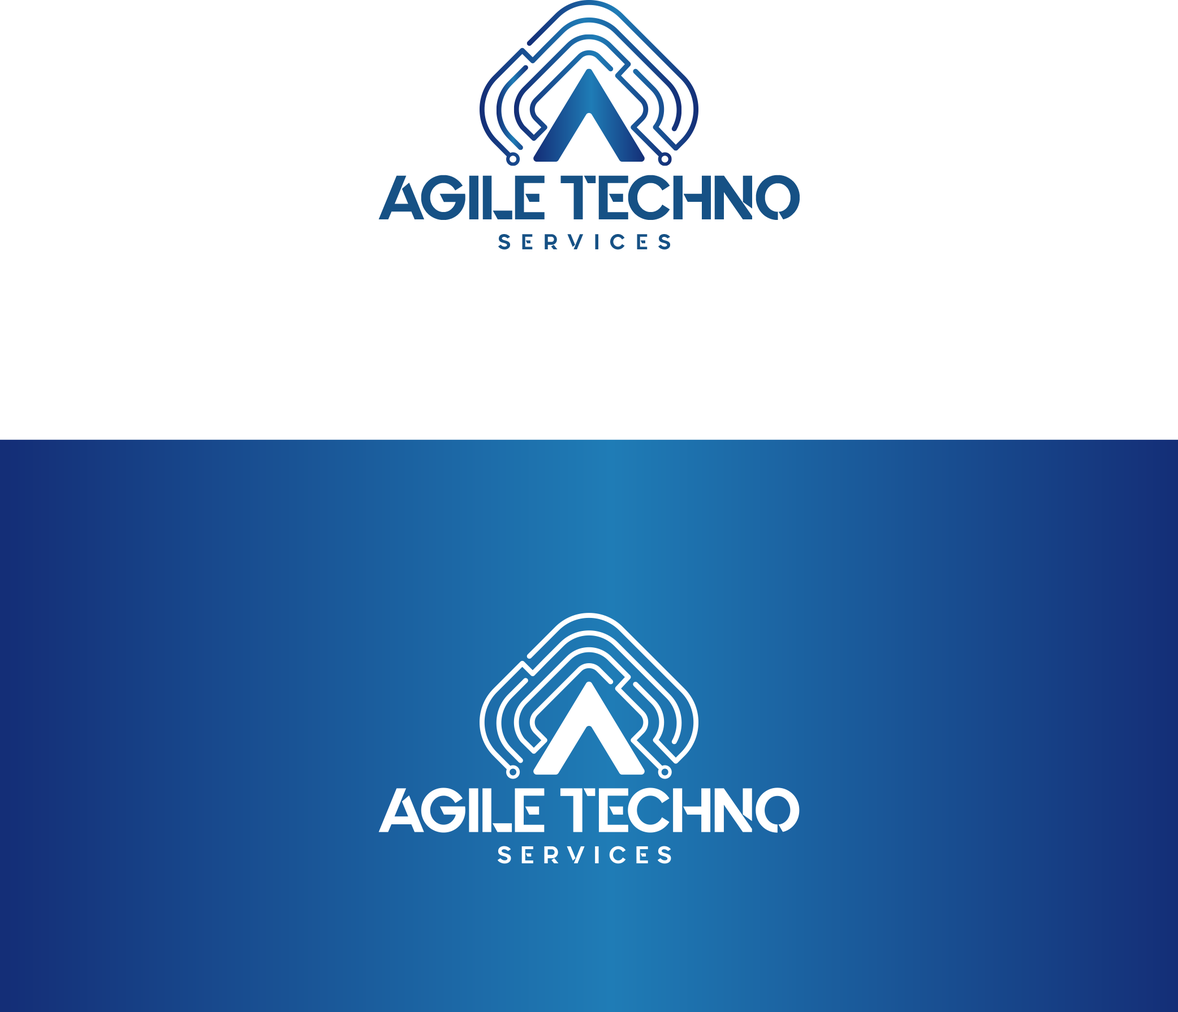
<style>
.page{position:relative;width:1178px;height:1012px;background:#ffffff}
.page>*{position:absolute;margin:0}
.t1{font:62.4px "Quantify";color:#165185}
.t2{font:21.7px "Quantify";letter-spacing:0.5em;color:#165185}
</style>
<div class="page">
<p class="t1" style="left:378px;top:175px;width:422px;height:45px">AGILE TECHNO</p>
<p class="t2" style="left:498px;top:234px;width:172px;height:16px">SERVICES</p>
</div>
